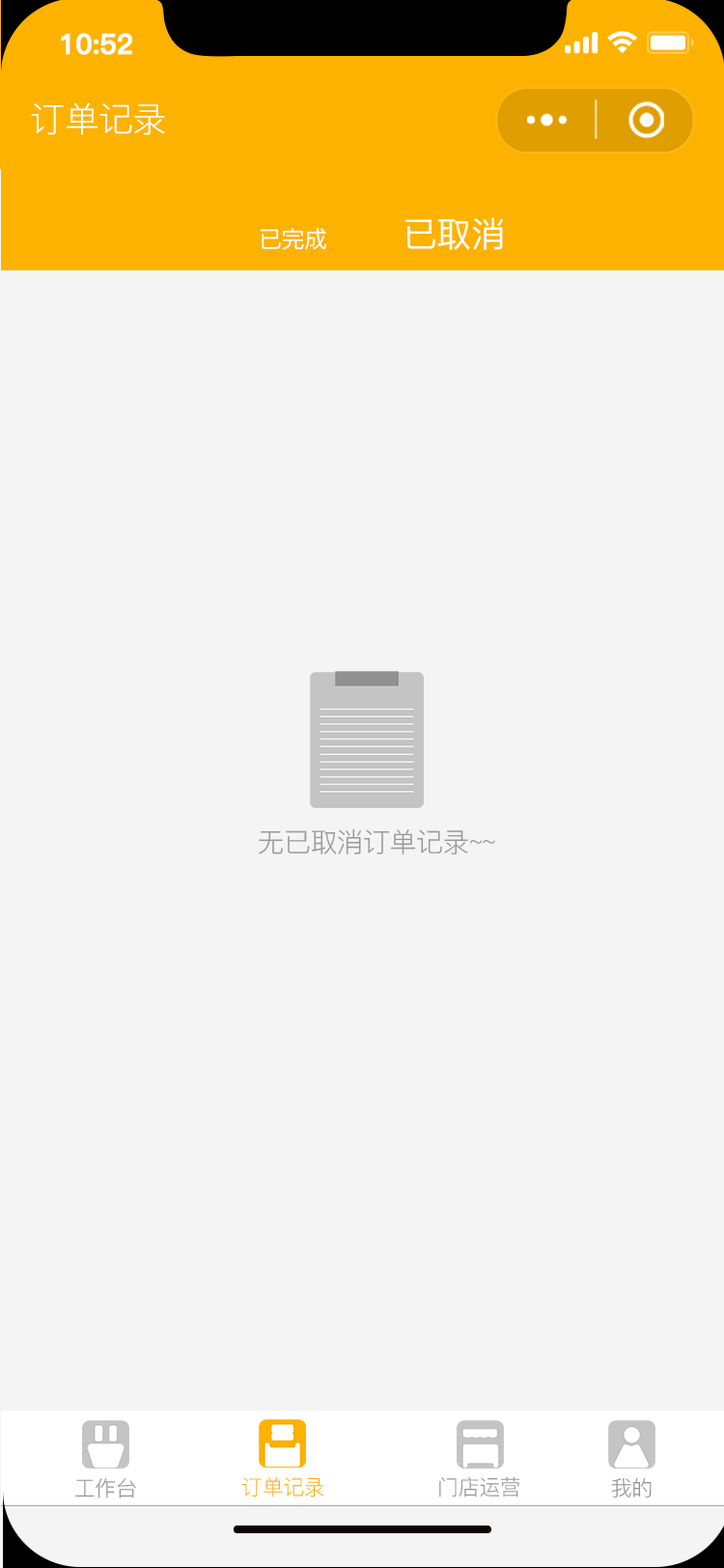
<style>
.page{position:relative;width:724px;height:1568px;background:#f4f4f4}
.page>*{position:absolute;margin:0}
.t1{font:27.5px "PingFang-SC-Bold";letter-spacing:-0.02em;color:#ffffff;font-weight:bold}
.t2{font:34.8px "PingFang-SC-Regular";letter-spacing:-0.02em;color:#ffffff}
.t3{font:34.8px "PingFang-SC-Medium";letter-spacing:-0.02em;color:#fefefe}
.t4{font:23.2px "PingFang-SC-Medium";letter-spacing:-0.02em;color:#fefefe}
.t5{font:27px "PingFang-SC-Regular";letter-spacing:-0.02em;color:#999999}
.t6{font:21.2px "PingFang-SC-Regular";letter-spacing:-0.02em;color:#999999}
.t7{font:21.2px "PingFang-SC-Regular";letter-spacing:-0.02em;color:#fdb200}
.t8{font:21.2px "PingFang-SC-Regular";letter-spacing:-0.02em;color:#919191}
</style>
<div class="page">
<p class="t1" style="left:61px;top:33px;width:71px;height:22px">10:52</p>
<p class="t2" style="left:31px;top:102px;width:134px;height:33px">订单记录</p>
<p class="t3" style="left:406px;top:217px;width:97px;height:33px">已取消</p>
<p class="t4" style="left:260px;top:228px;width:67px;height:22px">已完成</p>
<p class="t5" style="left:259px;top:828px;width:236px;height:26px">无已取消订单记录~~</p>
<p class="t6" style="left:75px;top:1478px;width:61px;height:20px">工作台</p>
<p class="t7" style="left:241px;top:1477px;width:83px;height:21px">订单记录</p>
<p class="t6" style="left:439px;top:1476px;width:81px;height:22px">门店运营</p>
<p class="t8" style="left:611px;top:1478px;width:41px;height:20px">我的</p>
</div>
